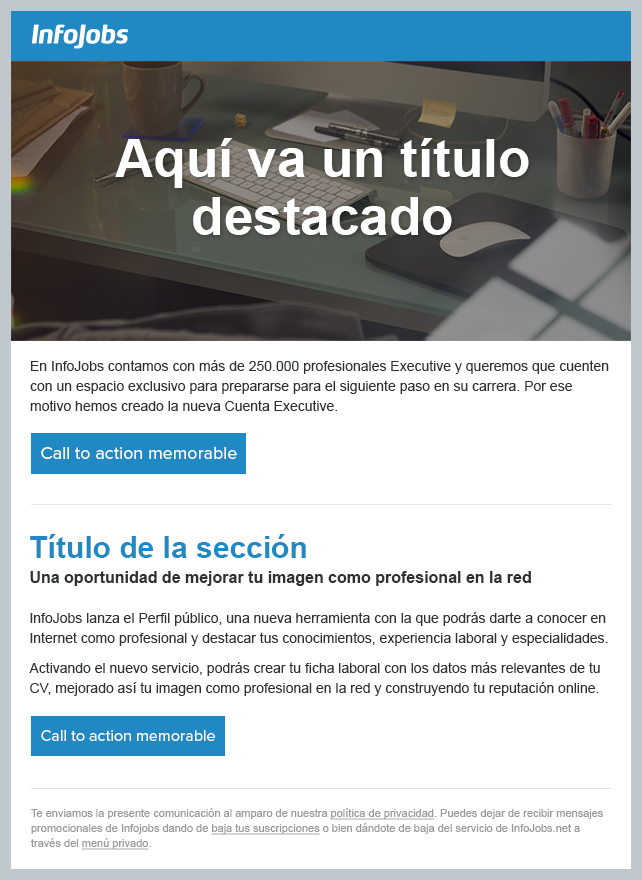
<style>
.page{position:relative;width:642px;height:880px;background:#ffffff}
.page>*{position:absolute;margin:0}
.t1{font:53px/58px "Arial-BoldMT";color:#ffffff}
.t2{font:14px/20px "ArialMT";color:#2d3133}
.t3{font:18px "ProximaNova-Regular";color:#ffffff}
.t4{font:30px/15px "Arial-BoldMT";color:#2088c2}
.t5{font:16px/25px "Arial-BoldMT";color:#2d3133}
.t6{font:14px/30px "ArialMT";color:#2d3133}
.t7{font:14px/40px "ArialMT";color:#2d3133}
.t8{font:16px "ProximaNova-Regular";color:#ffffff}
.t9{font:11px/15px "ArialMT";color:#999999}
.t10{font:11px/15px "ArialMT";color:#999999;text-decoration:underline}
</style>
<div class="page">
<p class="t1" style="left:115px;top:138px;width:414px;height:97px;text-align:center">Aquí va un título<br>destacado</p>
<p class="t2" style="left:30px;top:360px;width:579px;height:51px">En InfoJobs contamos con más de 250.000 profesionales Executive y queremos que cuenten con un espacio exclusivo para prepararse para el siguiente paso en su carrera. Por ese motivo hemos creado la nueva Cuenta Executive.</p>
<p class="t3" style="left:41px;top:446px;width:196px;height:13px">Call to action memorable</p>
<p class="t2" style="left:29px;top:534px;width:579px;height:162px"><span class="t4">Título de la sección<br></span><span class="t5">Una oportunidad de mejorar tu imagen como profesional en la red<br></span><span class="t6">I</span><span class="t7">nfoJobs lanza el Perfil público, una nueva herramienta con la que podrás darte a </span>conocer en Internet como profesional y destacar tus conocimientos, experiencia laboral y especialidades.<br><span class="t6">Activando el nuevo servicio, podrás crear tu ficha laboral con los datos más </span>relevantes de tu CV, mejorado así tu imagen como profesional en la red y construyendo tu reputación online.</p>
<p class="t8" style="left:41px;top:730px;width:174px;height:11px">Call to action memorable</p>
<p class="t9" style="left:31px;top:808px;width:572px;height:42px">Te enviamos la presente comunicación al amparo de nuestra <span class="t10">política de privacidad</span>. Puedes dejar de recibir mensajes promocionales de Infojobs dando de <span class="t10">baja tus suscripciones</span> o bien dándote de baja del servicio de InfoJobs.net a través del <span class="t10">menú privado</span>.</p>
</div>
